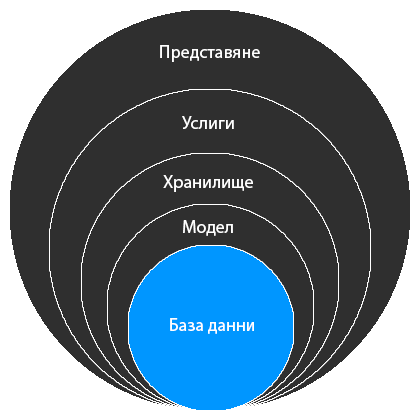
<style>
.page{position:relative;width:420px;height:420px;background:#2f2f2f}
.page>*{position:absolute;margin:0}
.t1{font:18px "MyriadPro-Regular";color:#ffffff}
</style>
<div class="page">
<p class="t1" style="left:160px;top:45px;width:100px;height:17px">Представяне</p>
<p class="t1" style="left:182px;top:116px;width:52px;height:13px">Услиги</p>
<p class="t1" style="left:163px;top:175px;width:90px;height:17px">Хранилище</p>
<p class="t1" style="left:183px;top:220px;width:50px;height:16px">Модел</p>
<p class="t1" style="left:170px;top:318px;width:84px;height:16px">База данни</p>
</div>
